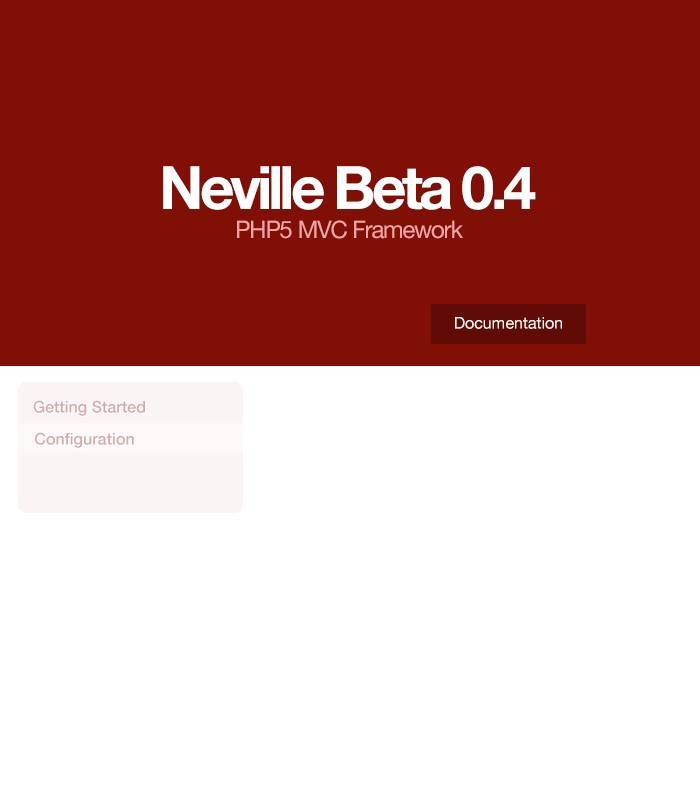
<style>
.page{position:relative;width:700px;height:800px;background:#ffffff}
.page>*{position:absolute;margin:0}
.t1{font:60px "HelveticaNeue-Bold";letter-spacing:-0.07em;color:#ffffff}
.t2{font:24px "HelveticaNeue";letter-spacing:-0.05em;color:#f5a3a2}
.t3{font:16px "HelveticaNeue";color:#ffffff}
.t4{font:16px "HelveticaNeue-Medium";color:#d4abab}
</style>
<div class="page">
<p class="t1" style="left:163px;top:166px;width:373px;height:44px">Neville Beta 0.4</p>
<p class="t2" style="left:237px;top:220px;width:226px;height:19px">PHP5 MVC Framework</p>
<p class="t3" style="left:455px;top:317px;width:107px;height:12px">Documentation</p>
<p class="t4" style="left:33px;top:400px;width:112px;height:16px">Getting Started</p>
<p class="t4" style="left:35px;top:432px;width:99px;height:16px">Configuration</p>
</div>
